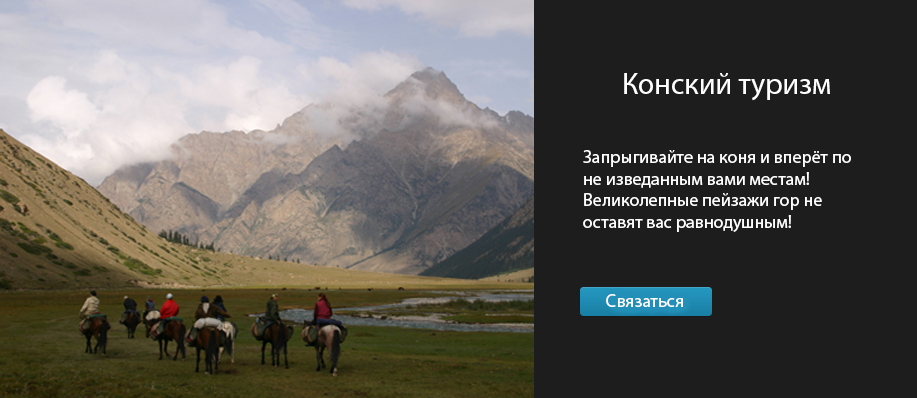
<style>
.page{position:relative;width:917px;height:398px;background:#1d1d1d}
.page>*{position:absolute;margin:0}
.t1{font:30px "MyriadPro-Regular";color:#ffffff}
.t2{font:18px "MyriadPro-Regular";color:#ffffff}
</style>
<div class="page">
<p class="t1" style="left:624px;top:73px;width:206px;height:28px">Конский туризм</p>
<p class="t2" style="left:583px;top:150px;width:268px;height:82px">Запрыгивайте на коня и вперёт по <br>не изведанным вами местам!<br>Великолепные пейзажи гор не <br>оставят вас равнодушным!</p>
<p class="t2" style="left:606px;top:294px;width:77px;height:13px">Связаться</p>
</div>
